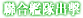
<style>
.page{position:relative;width:83px;height:18px;background:#ffffff}
.page>*{position:absolute;margin:0}
.t1{font:14px "RyuminPro-ExBold";color:#ffffff;font-weight:bold;scale:0.9 1}
</style>
<div class="page">
<p class="t1" style="left:3px;top:2px;width:77px;height:14px">聯合艦隊出擊</p>
</div>
